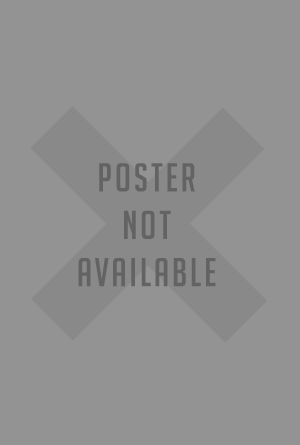
<style>
.page{position:relative;width:300px;height:445px;background:#939393}
.page>*{position:absolute;margin:0}
.t1{font:487.5px "AcuminPro-Bold";letter-spacing:0.075em;color:#898989;text-transform:uppercase}
.t2{font:39.4px "BigNoodleTitling";letter-spacing:0.075em;color:#636363;text-transform:uppercase}
</style>
<div class="page">
<p class="t1" style="left:30px;top:106px;width:237px;height:237px;rotate:-45deg">+</p>
<p class="t2" style="left:78px;top:163px;width:138px;height:124px;text-align:center">POSTER<br>NOT<br>AVAILABLE</p>
</div>
